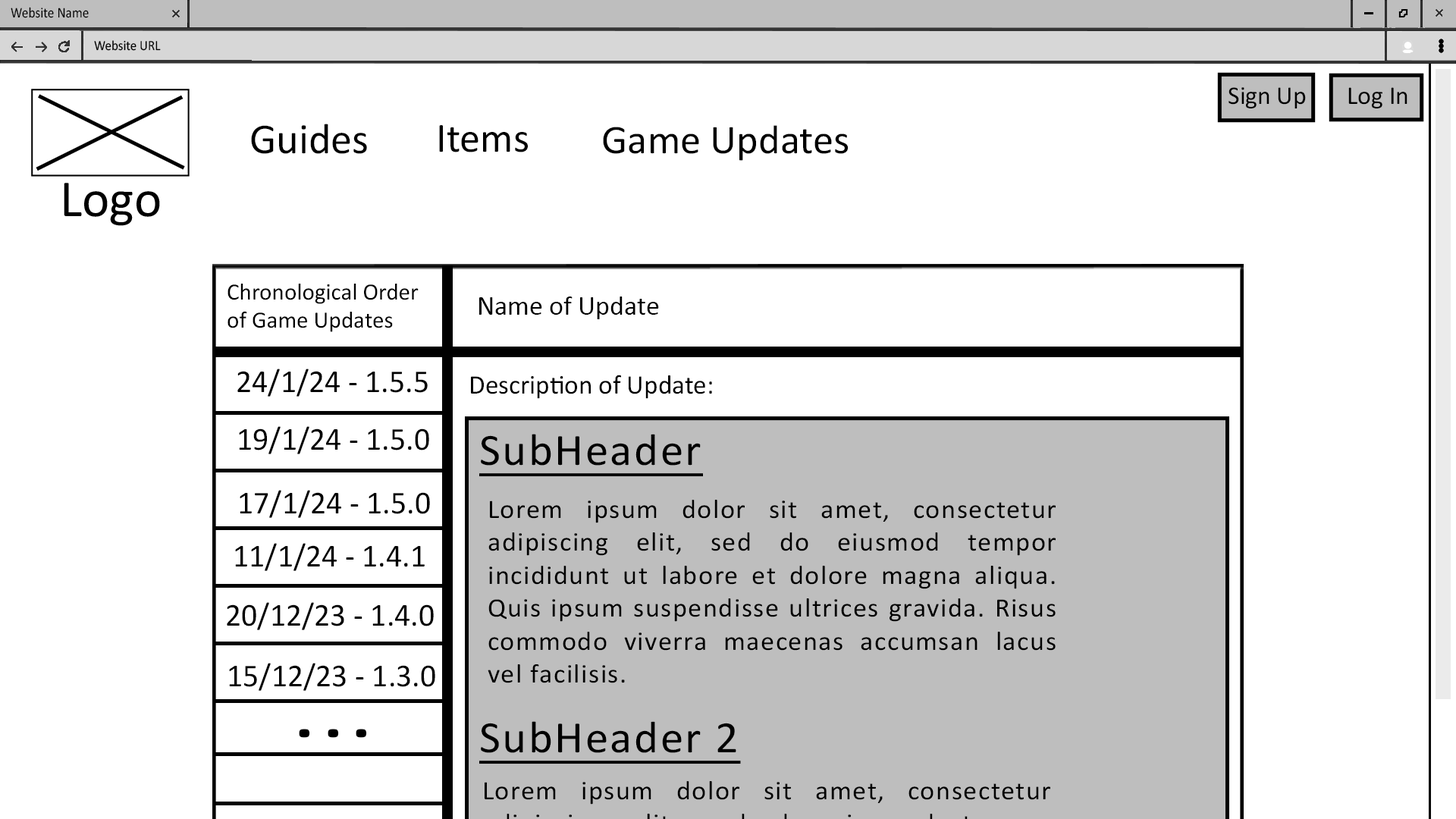
<style>
.page{position:relative;width:1456px;height:819px;background:#ffffff}
.page>*{position:absolute;margin:0}
.t1{font:14.8px "Calibri";color:#000000;scale:0.89 1}
.t2{font:14.1px "Calibri";color:#000000;scale:0.91 1}
.t3{font:43px "Calibri";color:#000000}
.t4{font:41.7px "Calibri";color:#000000}
.t5{font:41px "Calibri";color:#000000}
.t6{font:23.4px "Calibri";color:#000000}
.t7{font:27.3px "Calibri";color:#000000}
.t8{font:32.3px "Calibri";color:#000000}
.t9{font:26.9px "Calibri";color:#000000}
.t10{font:45px "Calibri";letter-spacing:0.04em;color:#000000;text-decoration:underline}
.t11{font:26.7px "Calibri";letter-spacing:0.04em;color:#000000;scale:1.03 1}
.t12{font:73.3px "Calibri";letter-spacing:0.04em;color:#000000;scale:1.33 1}
</style>
<div class="page">
<p class="t1" style="left:11px;top:7px;width:78px;height:11px">Website Name</p>
<p class="t2" style="left:94px;top:40px;width:67px;height:11px">Website URL</p>
<p class="t3" style="left:251px;top:124px;width:116px;height:30px">Guides</p>
<p class="t4" style="left:439px;top:125px;width:89px;height:27px">Items</p>
<p class="t5" style="left:603px;top:125px;width:245px;height:36px">Game Updates</p>
<p class="t6" style="left:227px;top:284px;width:192px;height:48px">Chronological Order <br>of Game Updates</p>
<p class="t7" style="left:479px;top:297px;width:180px;height:22px">Name of Update</p>
<p class="t8" style="left:237px;top:369px;width:191px;height:28px">24/1/24 - 1.5.5</p>
<p class="t9" style="left:471px;top:375px;width:241px;height:24px">Description of Update:</p>
<p class="t8" style="left:239px;top:426px;width:190px;height:28px">19/1/24 - 1.5.0</p>
<p class="t10" style="left:479px;top:434px;width:224px;height:43px">SubHeader</p>
<p class="t8" style="left:240px;top:490px;width:190px;height:28px">17/1/24 - 1.5.0</p>
<p class="t11" style="left:488px;top:500px;width:568px;height:183px;text-align:justify">Lorem ipsum dolor sit amet, consectetur adipiscing elit, sed do eiusmod tempor incididunt ut labore et dolore magna aliqua. Quis ipsum suspendisse ultrices gravida. Risus commodo viverra maecenas accumsan lacus vel facilisis.</p>
<p class="t8" style="left:235px;top:543px;width:190px;height:28px">11/1/24 - 1.4.1</p>
<p class="t8" style="left:227px;top:602px;width:207px;height:28px">20/12/23 - 1.4.0</p>
<p class="t8" style="left:229px;top:663px;width:206px;height:28px">15/12/23 - 1.3.0</p>
<p class="t10" style="left:479px;top:721px;width:262px;height:43px">SubHeader 2</p>
<p class="t12" style="left:299px;top:729px;width:68px;height:9px">...</p>
</div>
